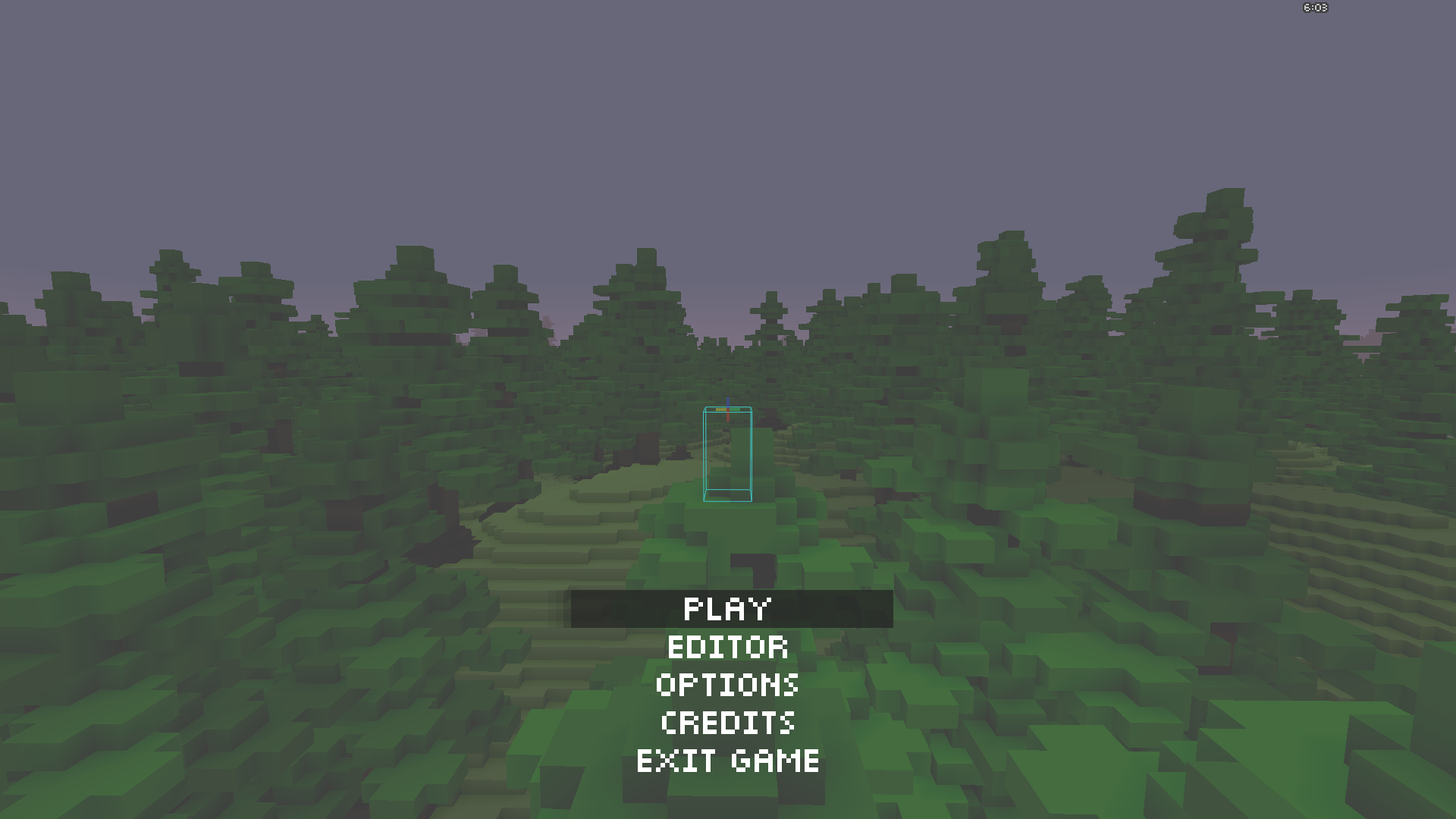
<style>
.page{position:relative;width:1456px;height:819px;background:#676779}
.page>*{position:absolute;margin:0}
.t1{font:22.7px "Pixel";letter-spacing:0.005em;color:#ffffff}
</style>
<div class="page">
<p class="t1" style="left:685px;top:598px;width:86px;height:22px">play</p>
<p class="t1" style="left:669px;top:635px;width:118px;height:23px">editor</p>
<p class="t1" style="left:657px;top:673px;width:141px;height:23px">options</p>
<p class="t1" style="left:662px;top:711px;width:132px;height:23px">credits</p>
<p class="t1" style="left:638px;top:749px;width:180px;height:23px">exit game</p>
</div>
